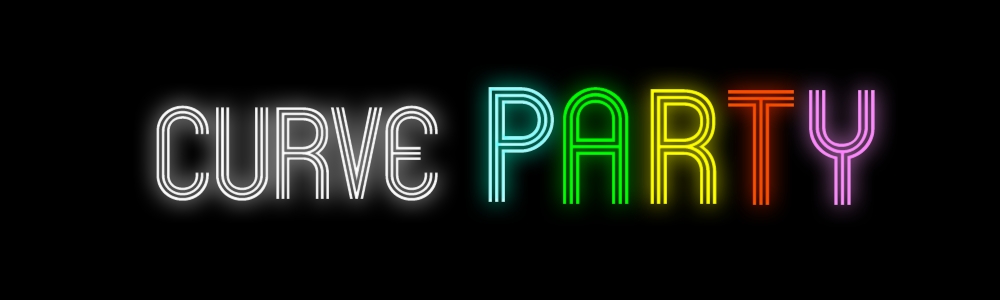
<style>
.page{position:relative;width:1000px;height:300px;background:#000000}
.page>*{position:absolute;margin:0}
.t1{font:144px "Mexcellent-Regular";color:#96efef}
.t2{font:144px "Mexcellent-Regular";color:#00ff00}
.t3{font:144px "Mexcellent-Regular";color:#ffff00}
.t4{font:144px "Mexcellent-Regular";color:#ff3300}
.t5{font:144px "Mexcellent-Regular";color:#f385f3}
.t6{font:115px "Mexcellent-Regular";color:#fefefe}
</style>
<div class="page">
<p class="t1" style="left:488px;top:87px;width:66px;height:115px">P</p>
<p class="t2" style="left:563px;top:87px;width:66px;height:117px">A</p>
<p class="t3" style="left:650px;top:89px;width:67px;height:115px">R</p>
<p class="t4" style="left:728px;top:90px;width:66px;height:115px">T</p>
<p class="t5" style="left:809px;top:90px;width:66px;height:115px">Y</p>
<p class="t6" style="left:156px;top:105px;width:282px;height:96px">curve</p>
</div>
